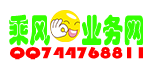
<style>
.page{position:relative;width:152px;height:68px;background:#ffffff}
.page>*{position:absolute;margin:0}
.t1{font:32.6px "STHupo";color:#33ff00;scale:0.65 1}
.t2{font:16px "STHupo";color:#ff0000;scale:1.3 1}
</style>
<div class="page">
<p class="t1" style="left:9px;top:14px;width:134px;height:32px">乘风      业务网</p>
<p class="t2" style="left:10px;top:47px;width:133px;height:13px">QQ744768811</p>
</div>
